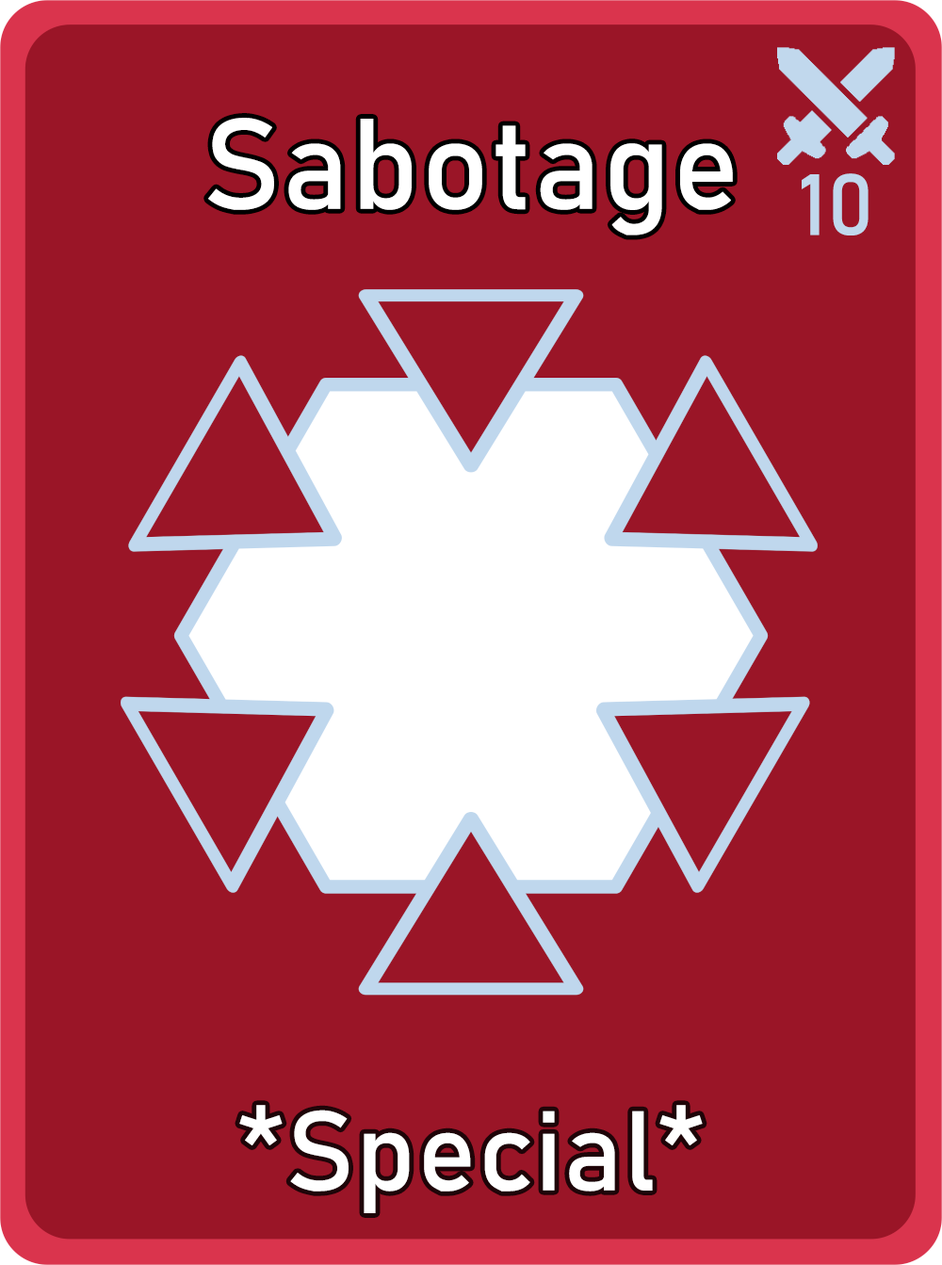
<style>
.page{position:relative;width:942px;height:1265px;background:#9a1527}
.page>*{position:absolute;margin:0}
.t1{font:126.7px "Bahnschrift";letter-spacing:0.01em;color:#ffffff}
.t2{font:85px "Bahnschrift";letter-spacing:0.01em;color:#c1d8ed}
.t3{font:111.3px "Bahnschrift";letter-spacing:0.01em;color:#ffffff}
</style>
<div class="page">
<p class="t1" style="left:208px;top:118px;width:525px;height:118px">Sabotage</p>
<p class="t2" style="left:802px;top:173px;width:67px;height:63px">10</p>
<p class="t3" style="left:239px;top:1105px;width:464px;height:109px">*Special*</p>
</div>
